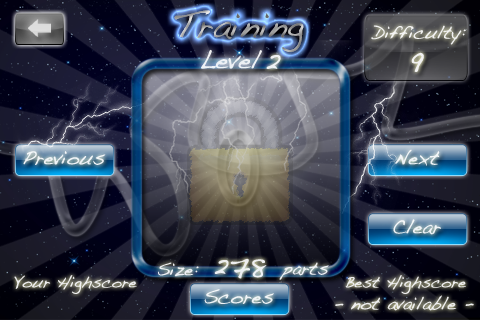
<style>
.page{position:relative;width:480px;height:320px}
.page>*{position:absolute;margin:0}
.t1{font:36px "Handwriting-Dakota"}
.t2{font:18px "Handwriting-Dakota";color:#ffffff}
.t3{font:26px "Handwriting-Dakota";color:#ffffff}
.t4{font:30px "Handwriting-Dakota";color:#ffffff}
.t5{font:20px "Handwriting-Dakota";color:#ffffff}
.t6{font:16px "Handwriting-Dakota";color:#ffffff}
</style>
<div class="page">
<p class="t1" style="left:174px;top:10px;width:130px;height:42px">Training</p>
<p class="t1" style="left:174px;top:10px;width:130px;height:42px">Training</p>
<p class="t2" style="left:371px;top:25px;width:95px;height:20px;opacity:0.93">Difficulty:</p>
<p class="t3" style="left:201px;top:49px;width:61px;height:20px;opacity:0.93">Level</p>
<p class="t4" style="left:411px;top:52px;width:13px;height:20px;opacity:0.93">9</p>
<p class="t4" style="left:266px;top:55px;width:15px;height:14px;opacity:0.93">2</p>
<p class="t5" style="left:395px;top:149px;width:45px;height:17px;opacity:0.93">Next</p>
<p class="t5" style="left:23px;top:151px;width:83px;height:14px;opacity:0.93">Previous</p>
<p class="t5" style="left:393px;top:219px;width:48px;height:16px;opacity:0.93">Clear</p>
<p class="t2" style="left:158px;top:262px;width:41px;height:15px;opacity:0.93">Size:</p>
<p class="t4" style="left:214px;top:258px;width:53px;height:21px;opacity:0.93">278</p>
<p class="t2" style="left:279px;top:262px;width:50px;height:18px;opacity:0.93">parts</p>
<p class="t6" style="left:14px;top:275px;width:123px;height:19px;opacity:0.93">Your Highscore</p>
<p class="t6" style="left:345px;top:275px;width:121px;height:19px;opacity:0.93">Best Highscore</p>
<p class="t5" style="left:204px;top:289px;width:70px;height:15px;opacity:0.93">Scores</p>
<p class="t2" style="left:335px;top:295px;width:139px;height:16px;opacity:0.93">- not available -</p>
</div>
